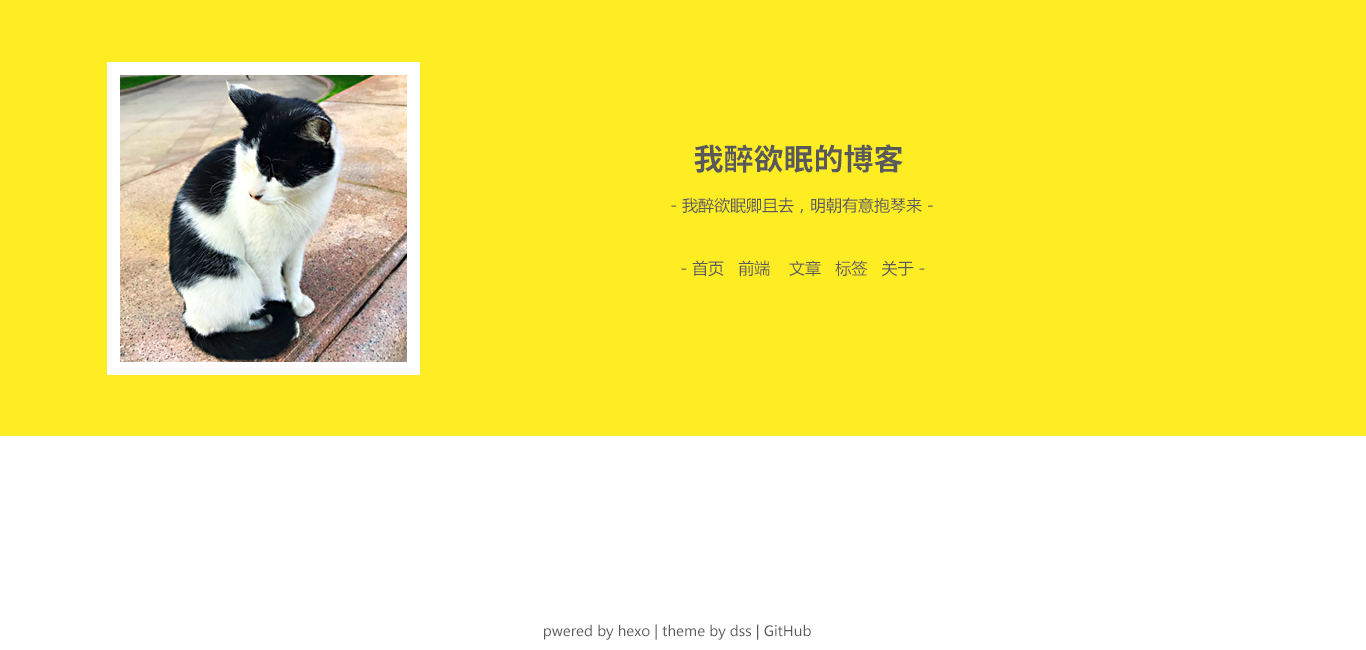
<style>
.page{position:relative;width:1366px;height:650px;background:#feed22}
.page>*{position:absolute;margin:0}
.t1{font:30px "SourceHanSansCN-Bold";color:#595959}
.t2{font:16px "MicrosoftYaHei";color:#595959}
.t3{font:14px "MicrosoftYaHei";color:#595959}
</style>
<div class="page">
<p class="t1" style="left:694px;top:144px;width:209px;height:29px">我醉欲眠的博客</p>
<p class="t2" style="left:671px;top:197px;width:262px;height:17px">- 我醉欲眠卿且去，明朝有意抱琴来 -</p>
<p class="t2" style="left:681px;top:260px;width:244px;height:17px">- 首页   前端    文章   标签   关于 -</p>
<p class="t3" style="left:544px;top:624px;width:267px;height:16px">pwered by hexo | theme by dss | GitHub</p>
</div>
